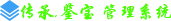
<style>
.page{position:relative;width:171px;height:21px;background:#ffffff}
.page>*{position:absolute;margin:0}
.t1{font:18px "STXingkai";color:#49fb03}
</style>
<div class="page">
<p class="t1" style="left:20px;top:3px;width:152px;height:17px">传承.鉴宝 管理系统</p>
</div>
